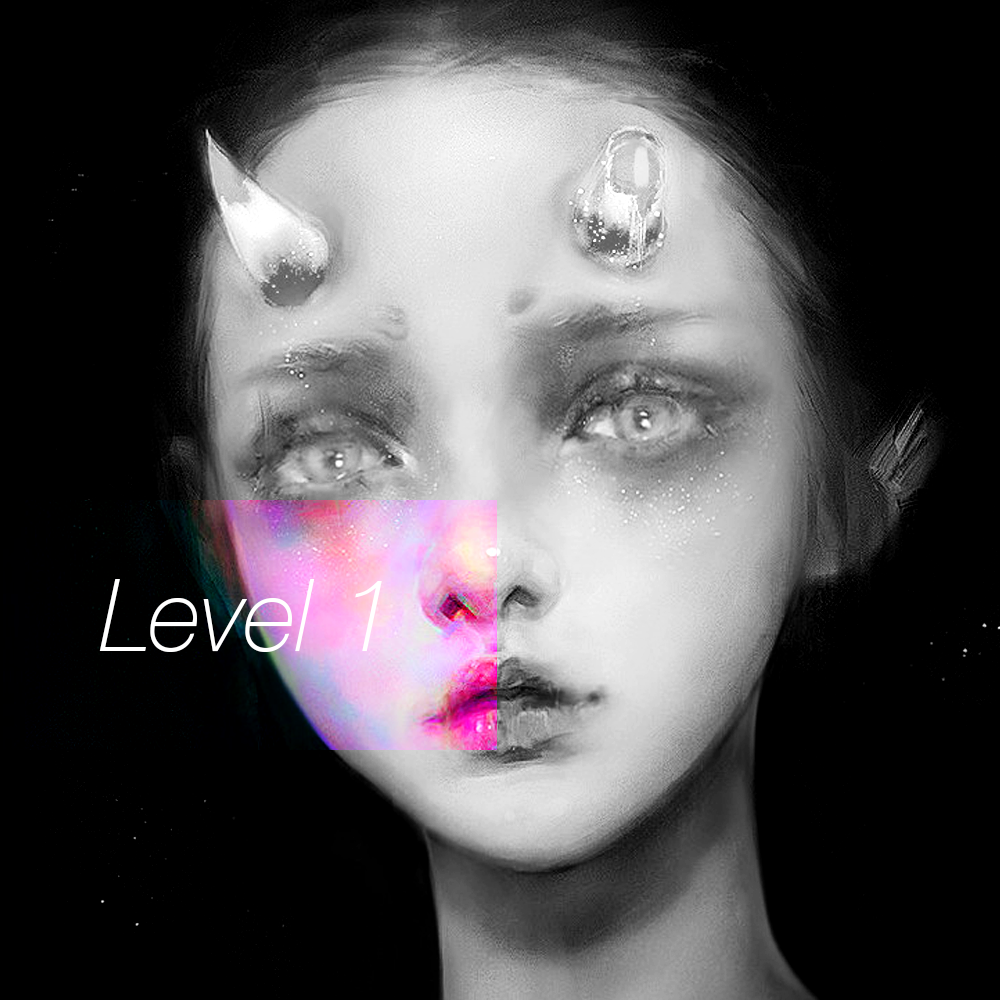
<style>
.page{position:relative;width:1000px;height:1000px;background:#000000}
.page>*{position:absolute;margin:0}
.t1{font:24.2px "HelveticaNeue-ThinItalic";color:#ffffff}
</style>
<div class="page">
<p class="t1" style="left:99px;top:579px;width:283px;height:73px">Level 1</p>
</div>
